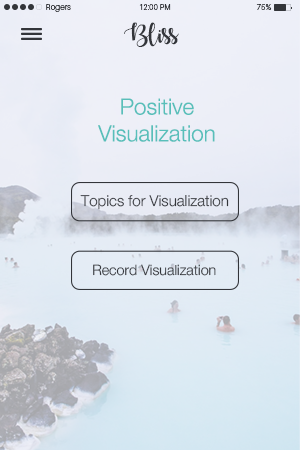
<style>
.page{position:relative;width:300px;height:450px}
.page>*{position:absolute;margin:0}
.t1{font:8.3px "Aileron-Light";color:#33353a}
.t2{font:7.8px "Aileron-Light";color:#33353a}
.t3{font:7.9px "Aileron-Light";color:#33353a}
.t4{font:18.9px "AutumninNovember";color:#33353a}
.t5{font:22.3px "HelveticaNeueLight";color:#58bfba}
.t6{font:15.1px "HelveticaNeueLight";color:#33353a}
.t7{font:14.3px "HelveticaNeueLight";color:#33353a}
</style>
<div class="page">
<p class="t1" style="left:46px;top:4px;width:25px;height:8px">Rogers</p>
<p class="t2" style="left:139px;top:4px;width:32px;height:6px">12:00 PM</p>
<p class="t3" style="left:256px;top:4px;width:16px;height:6px">75%</p>
<p class="t4" style="left:124px;top:22px;width:55px;height:25px">Bliss</p>
<p class="t5" style="left:98px;top:98px;width:117px;height:44px;text-align:center">Positive<br>Visualization</p>
<p class="t6" style="left:80px;top:195px;width:149px;height:15px">Topics for Visualization</p>
<p class="t7" style="left:93px;top:264px;width:123px;height:12px">Record Visualization</p>
</div>
